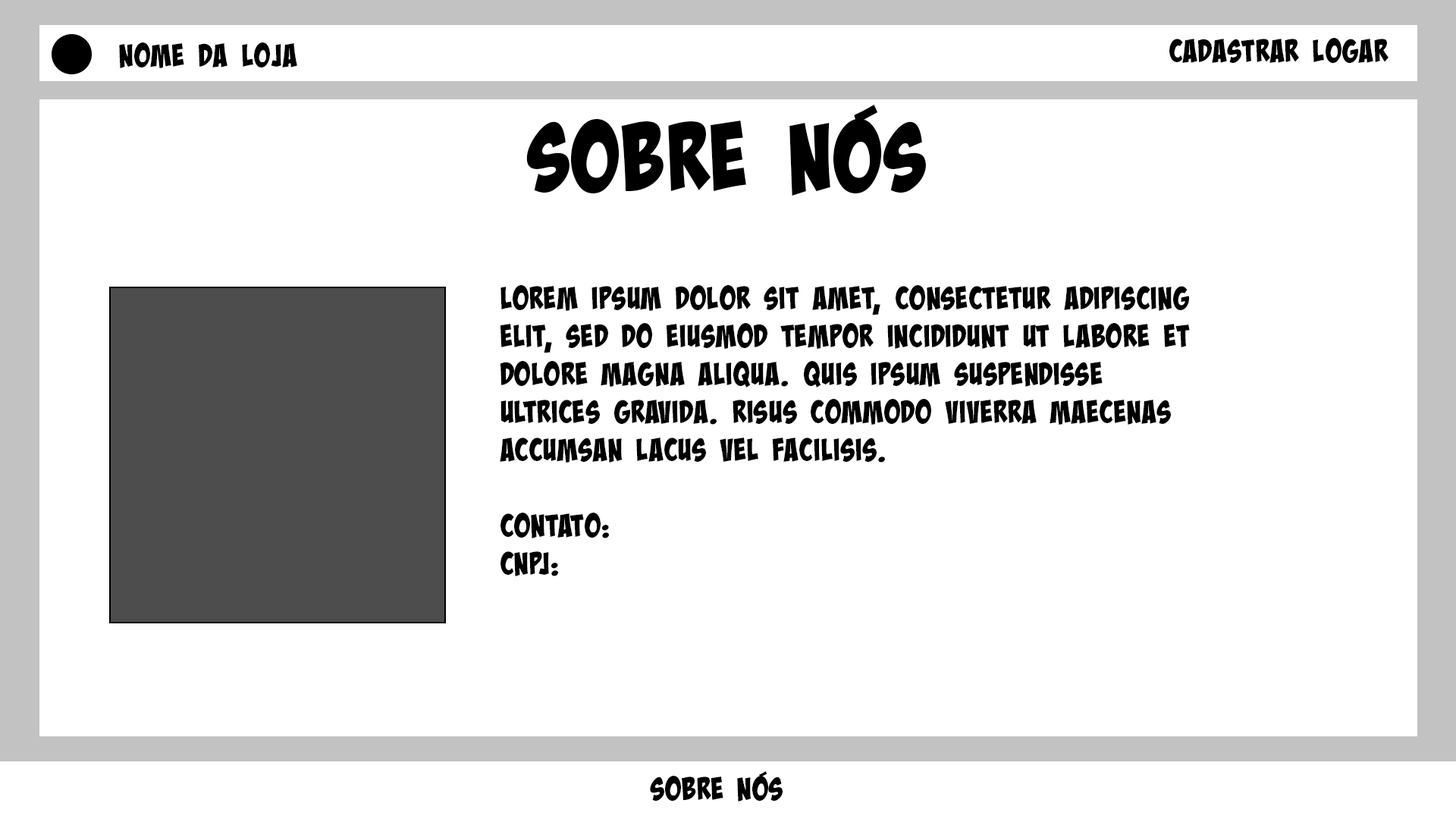
<style>
.page{position:relative;width:1456px;height:819px;background:#ffffff}
.page>*{position:absolute;margin:0}
.t1{font:31.6px "BadaBoomProBB";color:#000000}
.t2{font:94.8px "BadaBoomProBB";color:#000000}
</style>
<div class="page">
<p class="t1" style="left:1169px;top:38px;width:219px;height:25px">Cadastrar Logar</p>
<p class="t1" style="left:119px;top:42px;width:178px;height:26px">NOME DA LOJA</p>
<p class="t2" style="left:526px;top:105px;width:400px;height:91px">Sobre nós</p>
<p class="t1" style="left:500px;top:285px;width:690px;height:291px">Lorem ipsum dolor sit amet, consectetur adipiscing elit, sed do eiusmod tempor incididunt ut labore et dolore magna aliqua. Quis ipsum suspendisse ultrices gravida. Risus commodo viverra maecenas accumsan lacus vel facilisis.<br><br>Contato:<br>Cnpj:</p>
<p class="t1" style="left:650px;top:771px;width:133px;height:31px">Sobre nós</p>
</div>
